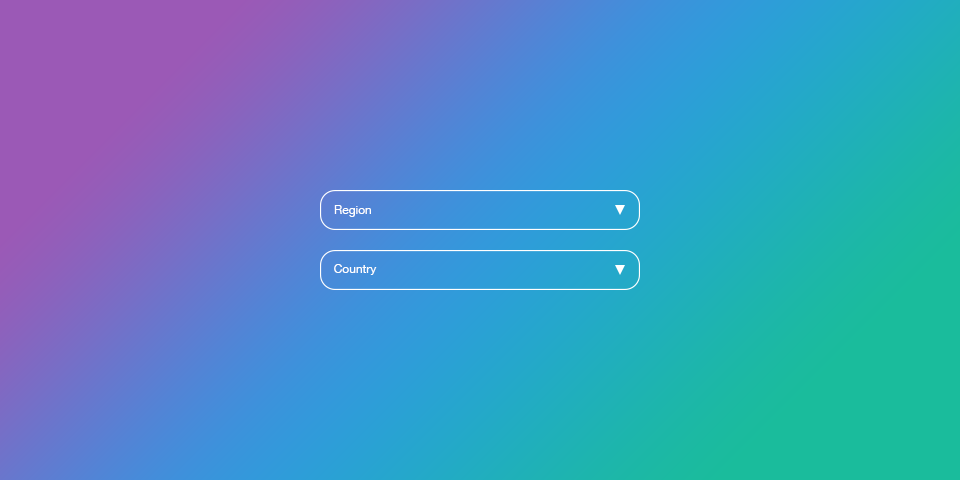
<style>
.page{position:relative;width:960px;height:480px}
.page>*{position:absolute;margin:0}
.t1{font:12px "HelveticaNeue";color:#ffffff}
</style>
<div class="page">
<p class="t1" style="left:334px;top:205px;width:37px;height:12px">Region</p>
<p class="t1" style="left:334px;top:264px;width:43px;height:11px">Country</p>
</div>
